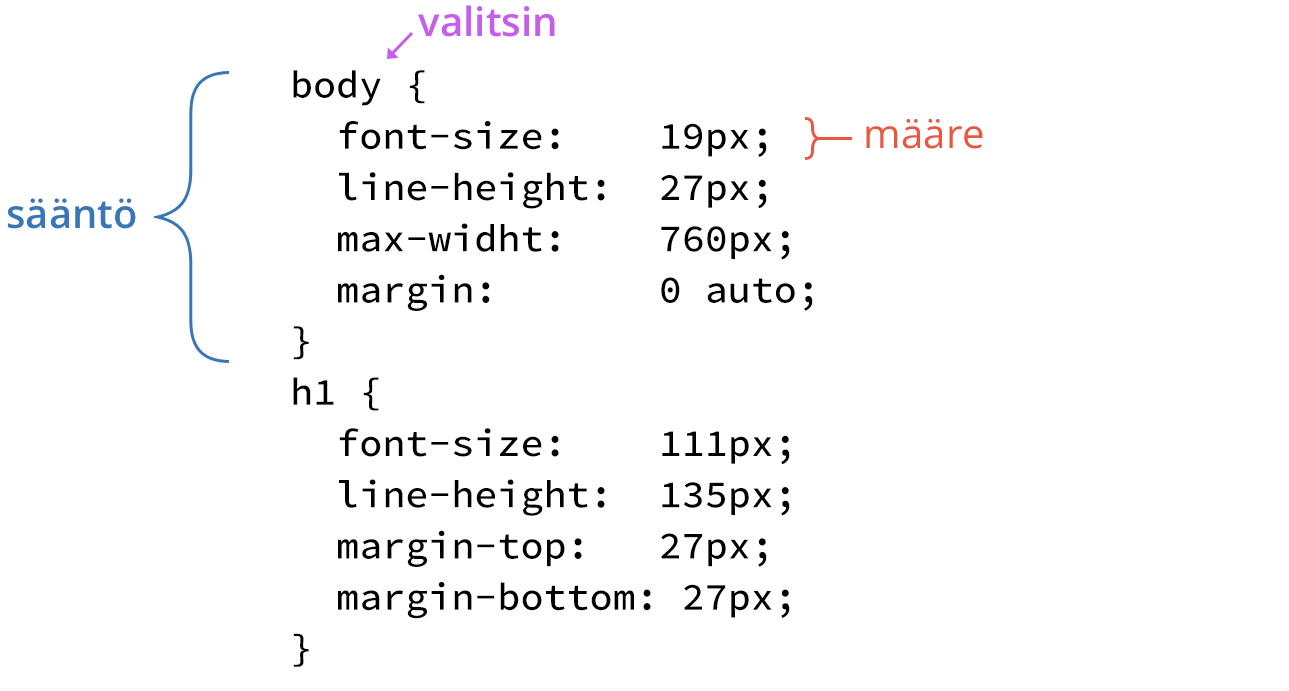
<style>
.page{position:relative;width:1289px;height:691px;background:#ffffff}
.page>*{position:absolute;margin:0}
.t1{font:40px "OpenSans-Semibold";color:#c55feb}
.t2{font:38.4px/51.2px "SourceCodePro-Medium";color:#000000}
.t3{font:40px "OpenSans";color:#eb563e}
.t4{font:40px "OpenSans-Semibold";color:#3976b5}
</style>
<div class="page">
<p class="t1" style="left:418px;top:5px;width:137px;height:32px">valitsin</p>
<p class="t2" style="left:293px;top:70px;width:520px;height:597px">body {<br> font-size:   19px;<br> line-height:  27px;<br> max-widht:   760px;<br> margin:    0 auto;<br>}<br>h1 {<br> font-size:   111px;<br> line-height:  135px;<br> margin-top:  27px;<br> margin-bottom: 27px;<br>}</p>
<p class="t3" style="left:866px;top:119px;width:117px;height:30px">määre</p>
<p class="t4" style="left:7px;top:198px;width:129px;height:31px">sääntö</p>
</div>
